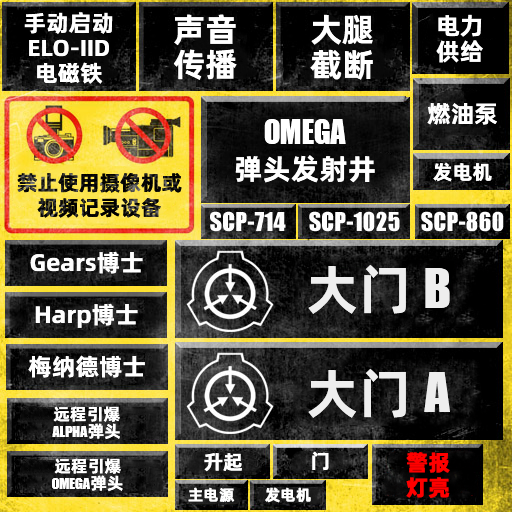
<style>
.page{position:relative;width:512px;height:512px}
.page>*{position:absolute;margin:0}
.t1{font:23px/25px "AlibabaPuHuiTiB";color:#ffffff}
.t2{font:33px/35px "AlibabaPuHuiTiB";color:#ffffff}
.t3{font:24px/26px "AlibabaPuHuiTiB";color:#ffffff}
.t4{font:24px "AlibabaPuHuiTiB";color:#ffffff}
.t5{font:36px/40px "URWImpactW01-Bold";color:#ffffff}
.t6{font:29px/40px "AlibabaPuHuiTiB";color:#ffffff}
.t7{font:21px/25px "AlibabaPuHuiTiB";color:#0c0c0c}
.t8{font:20px "AlibabaPuHuiTiB";color:#ffffff}
.t9{font:53px "AlibabaPuHuiTiB";color:#eeeeee}
.t10{font:60px "URWImpactW01-Bold";color:#eeeeee}
.t11{font:17px/17px "URWImpactW01-Bold";color:#ffffff}
.t12{font:17px/17px "AlibabaPuHuiTiB";color:#ffffff}
.t13{font:22px/25px "AlibabaPuHuiTiB";color:#ff0000;font-weight:bold}
.t14{font:15px "AlibabaPuHuiTiM";color:#ffffff;font-weight:bold}
</style>
<div class="page">
<p class="t1" style="left:24px;top:12px;width:89px;height:72px;text-align:center">手动启动<br>ELO-IID<br>电磁铁</p>
<p class="t2" style="left:173px;top:14px;width:64px;height:66px">声音<br>传播</p>
<p class="t2" style="left:310px;top:14px;width:63px;height:66px">大腿<br>截断</p>
<p class="t3" style="left:436px;top:14px;width:47px;height:49px">电力<br>供给</p>
<p class="t4" style="left:427px;top:103px;width:70px;height:22px">燃油泵</p>
<p class="t5" style="left:235px;top:119px;width:140px;height:64px;text-align:center">OMEGA<br><span class="t6">弹头发射井</span></p>
<p class="t7" style="left:17px;top:173px;width:165px;height:45px;text-align:center">禁止使用摄像机或<br>视频记录设备</p>
<p class="t8" style="left:433px;top:162px;width:59px;height:20px">发电机</p>
<p class="t4" style="left:30px;top:251px;width:113px;height:23px">Gears博士</p>
<p class="t9" style="left:308px;top:264px;width:142px;height:50px">大门        <span class="t10">B</span></p>
<p class="t4" style="left:35px;top:303px;width:103px;height:25px">Harp博士</p>
<p class="t4" style="left:28px;top:355px;width:117px;height:23px">梅纳德博士</p>
<p class="t9" style="left:308px;top:368px;width:142px;height:50px">大门        <span class="t10">A</span></p>
<p class="t11" style="left:52px;top:406px;width:68px;height:33px;text-align:center"><span class="t12">远程引爆<br></span>ALPHA<span class="t12">弹头</span></p>
<p class="t11" style="left:52px;top:458px;width:71px;height:33px;text-align:center"><span class="t12">远程引爆<br></span>OMEGA<span class="t12">弹头</span></p>
<p class="t8" style="left:204px;top:453px;width:38px;height:19px">升起</p>
<p class="t8" style="left:312px;top:451px;width:17px;height:20px">门</p>
<p class="t13" style="left:406px;top:452px;width:44px;height:46px">警报<br>灯亮</p>
<p class="t14" style="left:188px;top:487px;width:47px;height:15px">主电源</p>
<p class="t14" style="left:265px;top:487px;width:46px;height:16px">发电机</p>
</div>
